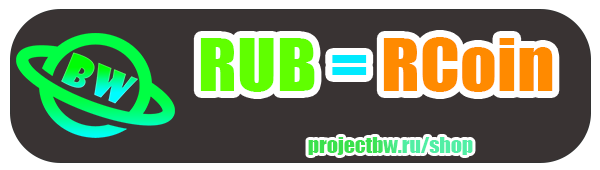
<style>
.page{position:relative;width:600px;height:170px;background:#393333}
.page>*{position:absolute;margin:0}
.t1{font:67.5px "Impact";color:#ff8a00;scale:1.07 1}
.t2{font:67.5px "Impact";color:#60ff00;scale:1.07 1}
.t3{font:67.5px "Impact";color:#00eaff;scale:1.07 1}
.t4{font:20.1px "Impact";scale:1.07 1}
</style>
<div class="page">
<p class="t1" style="left:200px;top:37px;width:353px;height:55px"><span class="t2">RUB </span><span class="t3">= </span>RCoin</p>
<p class="t4" style="left:308px;top:137px;width:165px;height:18px">projectbw.ru/shop</p>
</div>
